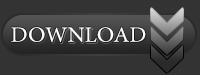
<style>
.page{position:relative;width:200px;height:75px;background:#333333}
.page>*{position:absolute;margin:0}
.t1{font:22px "MinionPro-Regular";letter-spacing:-0.006em;color:#ffffff;text-transform:uppercase;scale:1.06 1}
.t2{font:22px "MinionPro-Regular";letter-spacing:-0.006em;text-transform:uppercase;scale:1.06 1}
</style>
<div class="page">
<p class="t1" style="left:11px;top:27px;width:135px;height:15px">Download</p>
<p class="t2" style="left:12px;top:28px;width:135px;height:15px">Download</p>
</div>
